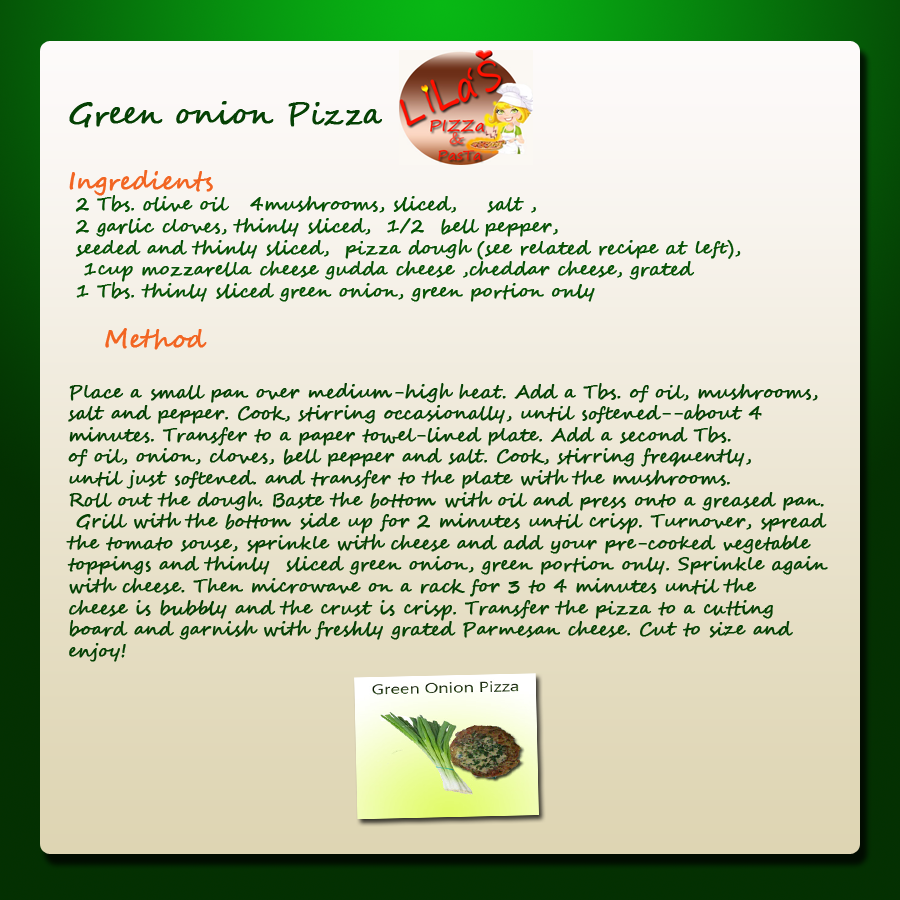
<style>
.page{position:relative;width:900px;height:900px}
.page>*{position:absolute;margin:0}
.t1{font:18px "SegoeScript";color:#054104;font-weight:bold}
.t2{font:30px "SegoeScript";color:#054104;font-weight:bold}
.t3{font:24px "SegoeScript";color:#f26522;font-weight:bold}
.t4{font:18px "SegoeScript";color:#065205;font-weight:bold}
</style>
<div class="page">
<p class="t1" style="left:66px;top:101px;width:762px;height:561px"><span class="t2">Green onion Pizza<br><br></span><span class="t3">Ingredients<br></span><span class="t4"> 2 Tbs. olive oil   4mushrooms, sliced,    salt , <br> 2 garlic cloves, thinly sliced,  1/2  bell pepper,<br> seeded and thinly sliced,  pizza dough (see related recipe at left),<br>  1cup mozzarella cheese gudda cheese ,cheddar cheese, grated<br> 1 Tbs. thinly sliced green onion, green portion only<br><br> </span><span class="t3">Method<br><br></span>Place a small pan over medium-high heat. Add a Tbs. of oil, mushrooms, <br>salt and pepper. Cook, stirring occasionally, until softened--about 4 <br>minutes. Transfer to a paper towel-lined plate. Add a second Tbs. <br>of oil, onion, cloves, bell pepper and salt. Cook, stirring frequently, <br>until just softened. and transfer to the plate with the mushrooms.<br>Roll out the dough. Baste the bottom with oil and press onto a greased pan.<br> Grill with the bottom side up for 2 minutes until crisp. Turnover, spread <br>the tomato souse, sprinkle with cheese and add your pre-cooked vegetable <br>toppings and thinly  sliced green onion, green portion only. Sprinkle again <br>with cheese. Then microwave on a rack for 3 to 4 minutes until the <br>cheese is bubbly and the crust is crisp. Transfer the pizza to a cutting <br>board and garnish with freshly grated Parmesan cheese. Cut to size and <br>enjoy!</p>
</div>
